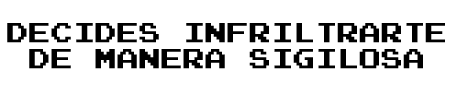
<style>
.page{position:relative;width:459px;height:89px;background:#ffffff}
.page>*{position:absolute;margin:0}
.t1{font:22px "PressStart2P";color:#000000}
</style>
<div class="page">
<p class="t1" style="left:7px;top:23px;width:438px;height:46px;text-align:center">DECIDES INFRILTRARTE<br>DE MANERA SIGILOSA</p>
</div>
